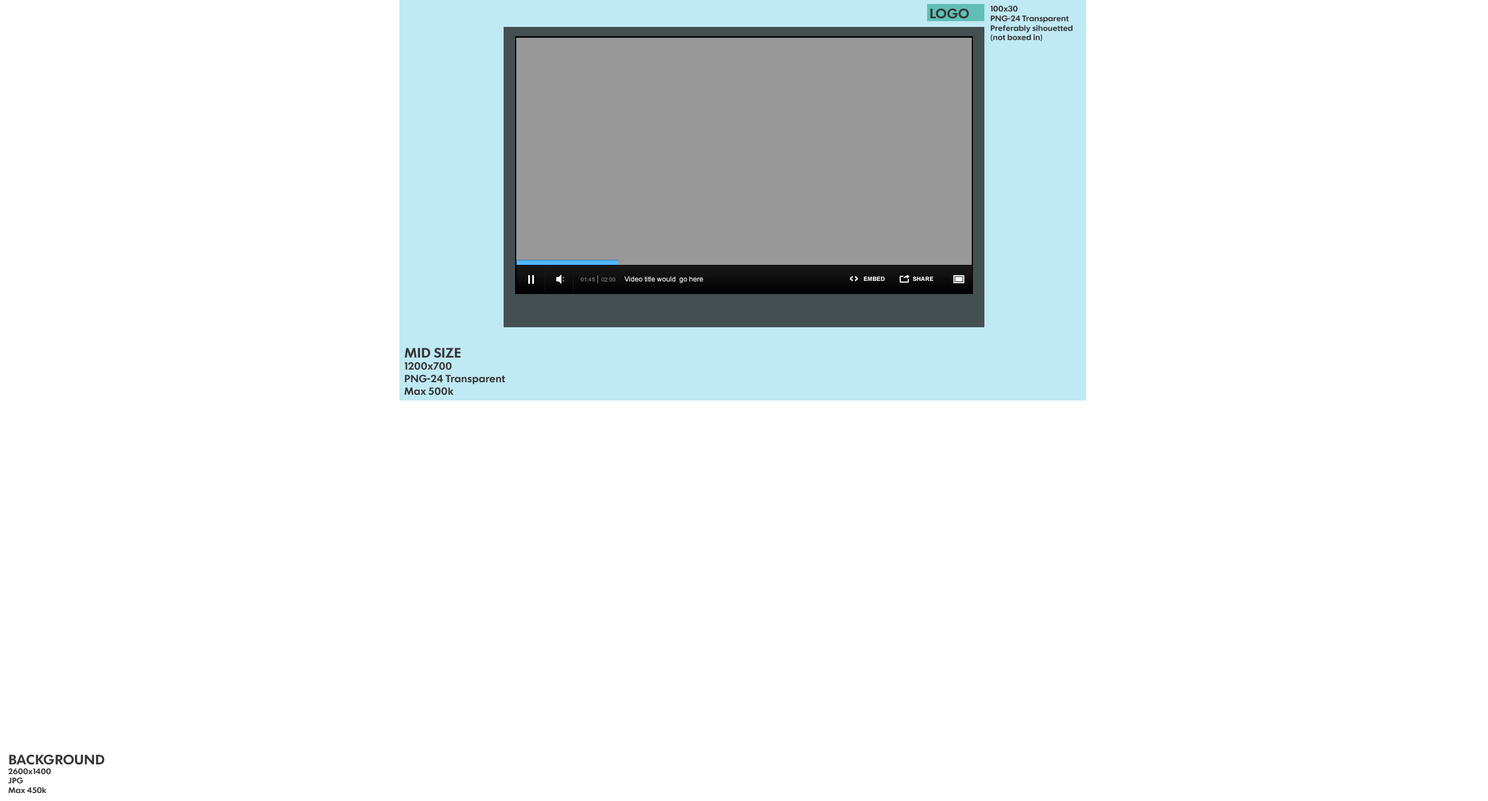
<style>
.page{position:relative;width:1488px;height:801px;background:#ffffff}
.page>*{position:absolute;margin:0}
.t1{font:8px "FuturaToday-DemiBold";color:#373737}
.t2{font:13.7px "FuturaToday-DemiBold";color:#373737}
.t3{font:10.3px "FuturaToday-DemiBold";color:#373737}
</style>
<div class="page">
<p class="t1" style="left:990px;top:6px;width:83px;height:36px">100x30<br>PNG-24 Transparent<br>Preferably sihouetted<br>(not boxed in)</p>
<p class="t2" style="left:930px;top:9px;width:39px;height:10px">LOGO</p>
<p class="t3" style="left:404px;top:348px;width:101px;height:47px"><span class="t2">MID SIZE<br></span>1200x700<br>PNG-24 Transparent<br>Max 500k</p>
<p class="t1" style="left:8px;top:755px;width:97px;height:39px"><span class="t2">BACKGROUND<br></span>2600x1400<br>JPG<br>Max 450k</p>
</div>
